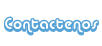
<style>
.page{position:relative;width:102px;height:46px;background:#ffffff}
.page>*{position:absolute;margin:0}
.t1{font:16px "AlbaSuper";color:#57a3d6}
</style>
<div class="page">
<p class="t1" style="left:4px;top:16px;width:95px;height:20px">Contactenos</p>
</div>
